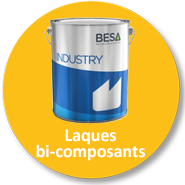
<style>
.page{position:relative;width:185px;height:185px;background:#fcbf18}
.page>*{position:absolute;margin:0}
.t1{font:18px/16px "Calibri-Bold";color:#ffffff}
</style>
<div class="page">
<p class="t1" style="left:36px;top:129px;width:109px;height:32px;text-align:center">Laques <br>bi-composants</p>
</div>
